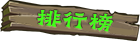
<style>
.page{position:relative;width:140px;height:41px;background:#ffffff}
.page>*{position:absolute;margin:0}
.t1{font:23.3px "GraveBustedStoneLishuSCRoughlyC";color:#41ff17;scale:1.24 1}
</style>
<div class="page">
<p class="t1" style="left:37px;top:10px;width:76px;height:22px;rotate:5deg">排行榜</p>
</div>
